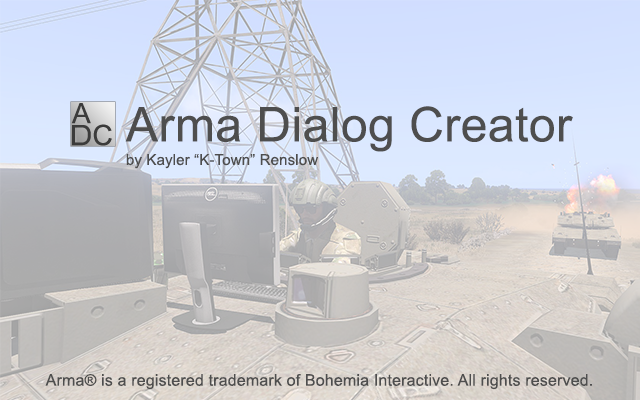
<style>
.page{position:relative;width:640px;height:400px}
.page>*{position:absolute;margin:0}
.t1{font:48px "ArialMT";letter-spacing:0.01em;color:#4e4e4e}
.t2{font:15px "ArialMT";letter-spacing:0.01em;color:#4e4e4e}
.t3{font:16px "ArialMT";letter-spacing:0.01em;color:#4e4e4e}
</style>
<div class="page">
<p class="t1" style="left:125px;top:106px;width:448px;height:46px">Arma Dialog Creator</p>
<p class="t2" style="left:126px;top:154px;width:192px;height:15px">by Kayler “K-Town” Renslow</p>
<p class="t3" style="left:45px;top:374px;width:547px;height:16px">Arma® is a registered trademark of Bohemia Interactive. All rights reserved.</p>
</div>
